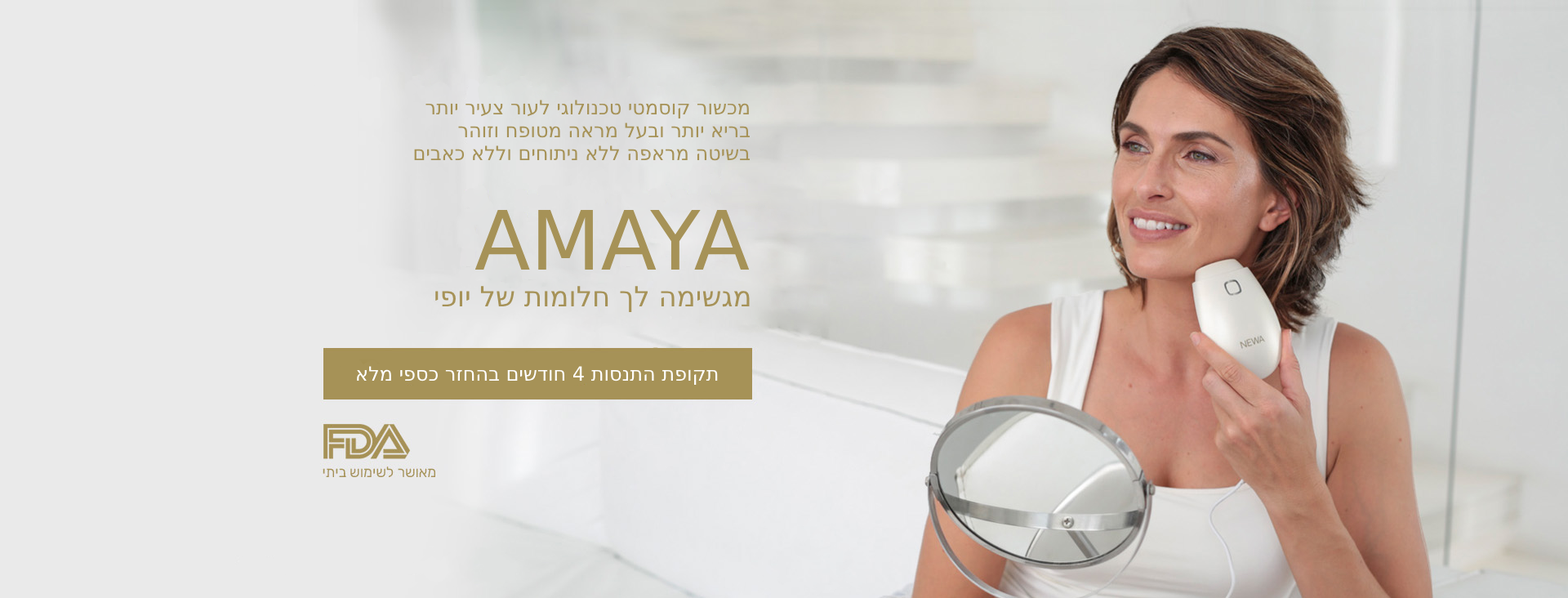
<style>
.page{position:relative;width:1568px;height:598px;background:#eaeaea}
.page>*{position:absolute;margin:0}
.t1{font:19.6px "DejaVuSans";color:#a69257}
.t2{font:81.7px "DejaVuSans";color:#a69257}
.t3{font:27.8px "DejaVuSans";color:#a69257}
.t4{font:19.6px "DejaVuSans";color:#ffffff}
</style>
<div class="page">
<p class="t1" style="left:414px;top:100px;width:336px;height:61px;text-align:right">מכשור קוסמטי טכנולוגי לעור צעיר יותר<br>בריא יותר ובעל מראה מטופח וזוהר<br>בשיטה מראפה ללא ניתוחים וללא כאבים</p>
<p class="t2" style="left:474px;top:210px;width:276px;height:60px">AMAYA</p>
<p class="t3" style="left:435px;top:286px;width:315px;height:27px">מגשימה לך חלומות של יופי</p>
<p class="t4" style="left:357px;top:366px;width:361px;height:19px">תקופת התנסות 4 חודשים בהחזר כספי מלא</p>
</div>
